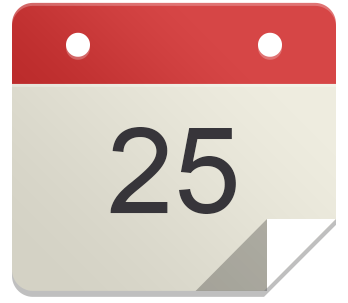
<style>
.page{position:relative;width:348px;height:303px}
.page>*{position:absolute;margin:0}
.t1{font:120px "ArialMT";color:#37353a}
</style>
<div class="page">
<p class="t1" style="left:110px;top:127px;width:126px;height:87px">25</p>
</div>
